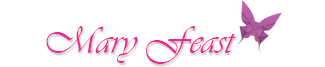
<style>
.page{position:relative;width:325px;height:67px;background:#ffffff}
.page>*{position:absolute;margin:0}
.t1{font:39.3px "Vivaldii";color:#f1278d}
</style>
<div class="page">
<p class="t1" style="left:46px;top:26px;width:190px;height:38px">Mary Feast</p>
</div>
